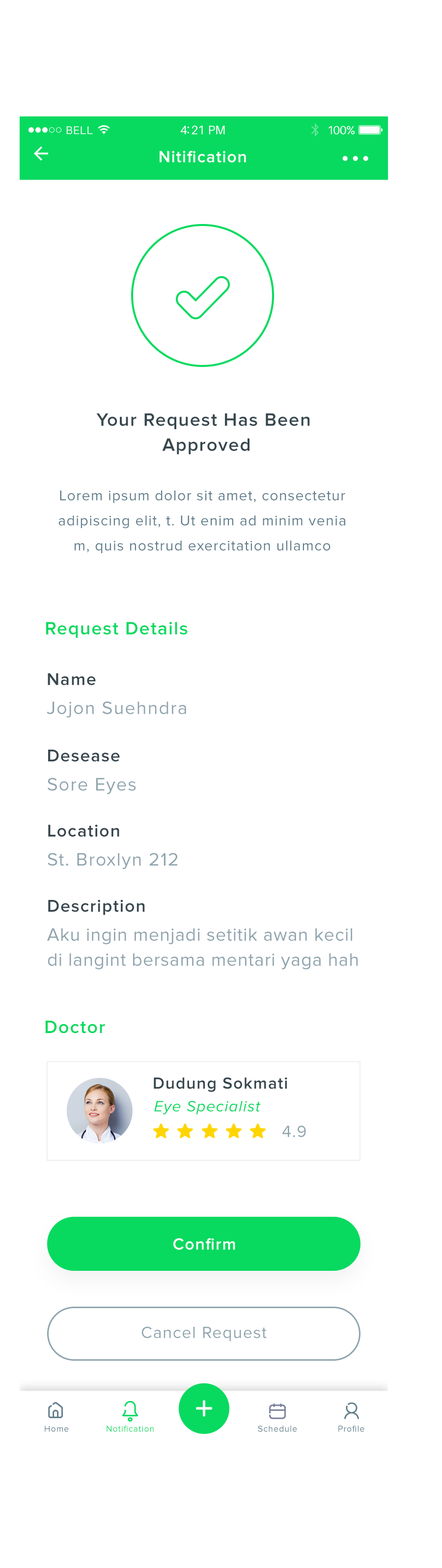
<style>
.page{position:relative;width:442px;height:1568px;background:#ffffff}
.page>*{position:absolute;margin:0}
.t1{font:16.7px "ProximaNova-Semibold";letter-spacing:0.05em;color:#ffffff}
.t2{font:34.9px "ProximaNova-Semibold";letter-spacing:0.05em;color:#ffffff}
.t3{font:18.7px/25.1px "ProximaNova-Semibold";letter-spacing:0.05em;color:#37474e}
.t4{font:14.7px/25.1px "ProximaNova-Regular";letter-spacing:0.05em;color:#607c8a}
.t5{font:18.7px "ProximaNova-Semibold";letter-spacing:0.05em;color:#07da5f}
.t6{font:17.7px "ProximaNova-Semibold";letter-spacing:0.05em;color:#38474f}
.t7{font:18.7px "ProximaNova-Regular";letter-spacing:0.05em;color:#90a4ae}
.t8{font:17.6px "ProximaNova-Semibold";letter-spacing:0.05em;color:#38474f}
.t9{font:18.7px/25px "ProximaNova-Regular";letter-spacing:0.025em;color:#90a4ae}
.t10{font:18.6px "ProximaNova-Semibold";letter-spacing:0.05em;color:#07da5f}
.t11{font:16.7px "ProximaNova-Semibold";letter-spacing:0.05em;color:#37474e}
.t12{font:15.7px "ProximaNova-RegularIt";letter-spacing:0.05em;color:#07da5f}
.t13{font:16.7px "ProximaNova-Regular";letter-spacing:0.05em;color:#8fa4ae}
.t14{font:16.7px "ProximaNova-Regular";letter-spacing:0.05em;color:#8fa4ad}
.t15{font:33.3px "Nunito-SemiBold";letter-spacing:0.05em;color:#ffffff}
.t16{font:8.8px "ProximaNova-Regular";letter-spacing:0.05em;color:#607d8b}
.t17{font:8.8px "ProximaNova-Regular";letter-spacing:0.05em;color:#07da5f}
</style>
<div class="page">
<p class="t1" style="left:160px;top:151px;width:86px;height:12px">Nitification</p>
<p class="t2" style="left:342px;top:156px;width:26px;height:5px">...</p>
<p class="t3" style="left:96px;top:413px;width:214px;height:41px;text-align:center">Your Request Has Been<br> Approved</p>
<p class="t4" style="left:58px;top:490px;width:287px;height:63px;text-align:center">Lorem ipsum dolor sit amet, consectetur<br>adipiscing elit, t. Ut enim ad minim venia<br>m, quis nostrud exercitation ullamco</p>
<p class="t5" style="left:46px;top:622px;width:142px;height:16px">Request Details</p>
<p class="t6" style="left:48px;top:673px;width:48px;height:12px">Name</p>
<p class="t7" style="left:47px;top:701px;width:139px;height:17px">Jojon Suehndra</p>
<p class="t6" style="left:48px;top:750px;width:72px;height:12px">Desease</p>
<p class="t7" style="left:48px;top:778px;width:88px;height:16px">Sore Eyes</p>
<p class="t8" style="left:48px;top:824px;width:71px;height:13px">Location</p>
<p class="t7" style="left:48px;top:853px;width:129px;height:16px">St. Broxlyn 212</p>
<p class="t8" style="left:48px;top:899px;width:97px;height:16px">Description</p>
<p class="t9" style="left:47px;top:928px;width:311px;height:42px">Aku ingin menjadi setitik awan kecil<br>di langint bersama mentari yaga hah</p>
<p class="t10" style="left:45px;top:1020px;width:60px;height:14px">Doctor</p>
<p class="t11" style="left:154px;top:1077px;width:133px;height:15px">Dudung Sokmati</p>
<p class="t12" style="left:154px;top:1101px;width:107px;height:14px">Eye Specialist</p>
<p class="t13" style="left:282px;top:1125px;width:24px;height:12px">4.9</p>
<p class="t1" style="left:173px;top:1238px;width:62px;height:12px">Confirm</p>
<p class="t14" style="left:141px;top:1326px;width:126px;height:15px">Cancel Request</p>
<p class="t15" style="left:196px;top:1400px;width:17px;height:17px">+</p>
<p class="t16" style="left:45px;top:1426px;width:24px;height:6px">Home</p>
<p class="t17" style="left:107px;top:1426px;width:47px;height:6px">Notification</p>
<p class="t16" style="left:258px;top:1426px;width:39px;height:6px">Schedule</p>
<p class="t16" style="left:338px;top:1426px;width:26px;height:6px">Profile</p>
</div>
